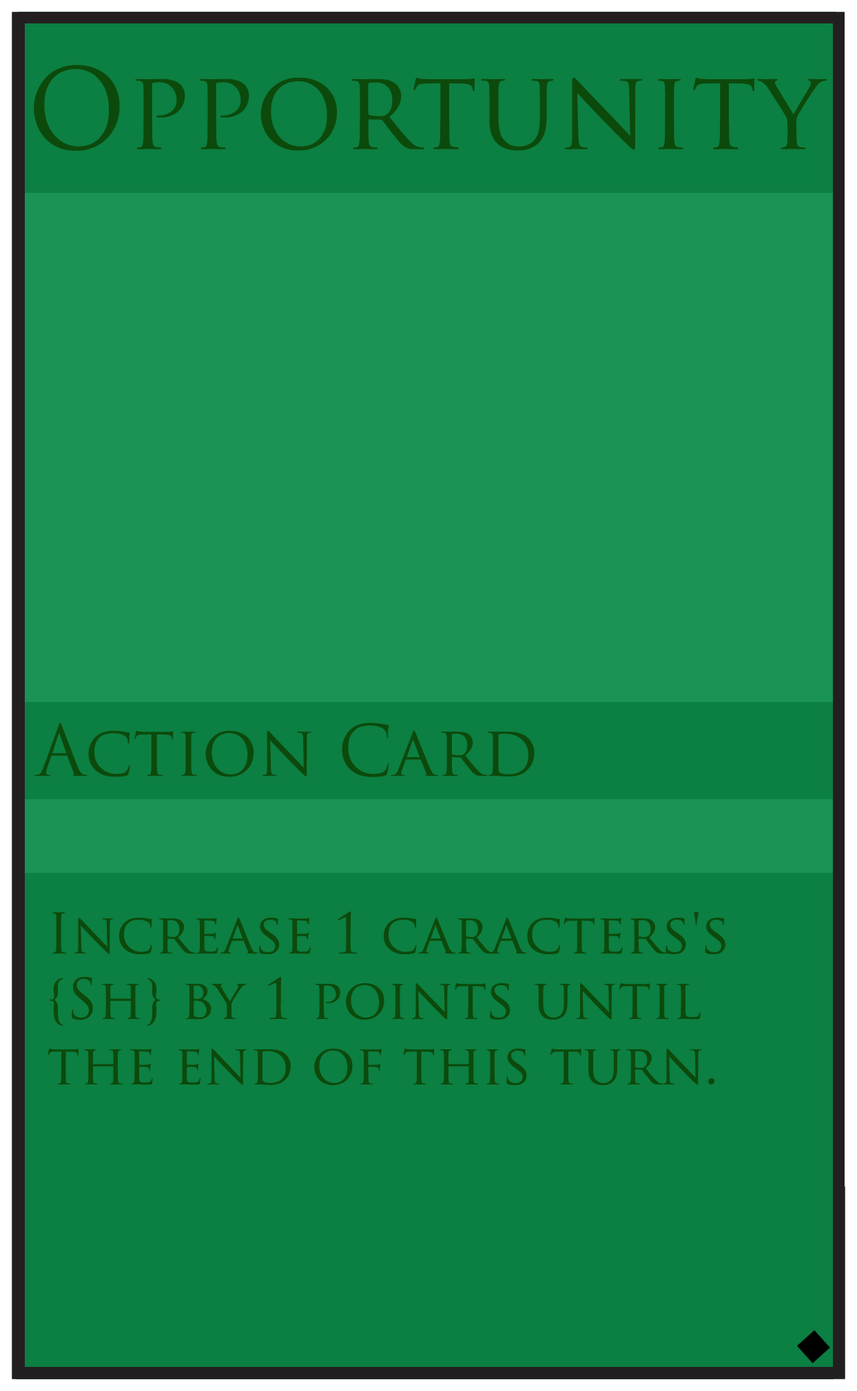
<style>
.page{position:relative;width:857px;height:1391px;background:#0c7f42}
.page>*{position:absolute;margin:0}
.t1{font:109.1px "TrajanPro-Regular";color:#0c4a0c}
.t2{font:68.9px "TrajanPro-Regular";color:#0c4a0c}
.t3{font:54.5px "TrajanPro-Regular";color:#0c4a0c}
</style>
<div class="page">
<p class="t1" style="left:34px;top:65px;width:793px;height:86px">Opportunity</p>
<p class="t2" style="left:34px;top:723px;width:501px;height:54px">Action Card</p>
<p class="t3" style="left:48px;top:912px;width:678px;height:173px">Increase 1 caracters's <br>{Sh} by 1 points until <br>the end of this turn.</p>
</div>
